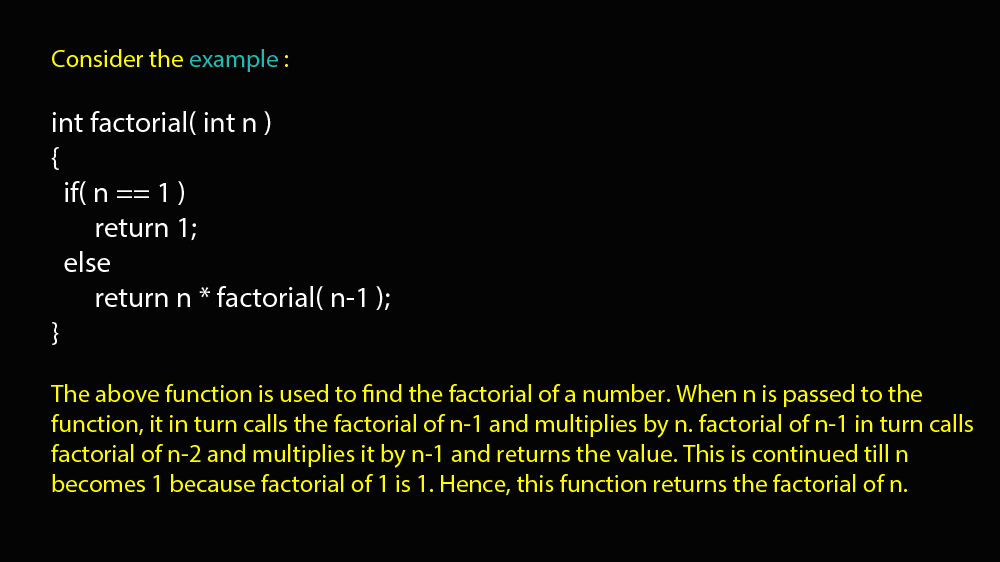
<style>
.page{position:relative;width:1000px;height:562px;background:#050404}
.page>*{position:absolute;margin:0}
.t1{font:25px "MyriadPro-Regular";color:#fefb04}
.t2{font:25px "MyriadPro-Regular";color:#1cbbb4}
.t3{font:29.2px "MyriadPro-Regular";color:#ffffff}
</style>
<div class="page">
<p class="t1" style="left:51px;top:49px;width:922px;height:447px">Consider the <span class="t2">example </span>:<br><br><span class="t3">int factorial( int n )<br>{<br>  if( n == 1 )<br>       return 1;<br>  else<br>       return n * factorial( n-1 );<br>}<br></span><br>The above function is used to find the factorial of a number. When n is passed to the function, it in turn calls the factorial of n-1 and multiplies by n. factorial of n-1 in turn calls factorial of n-2 and multiplies it by n-1 and returns the value. This is continued till n becomes 1 because factorial of 1 is 1. Hence, this function returns the factorial of n.</p>
</div>
